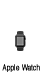
<style>
.page{position:relative;width:44px;height:82px;background:#ffffff}
.page>*{position:absolute;margin:0}
.t1{font:8px "Helvetica";color:#000000;font-weight:bold;scale:0.8 1}
</style>
<div class="page">
<p class="t1" style="left:2px;top:64px;width:38px;height:8px">Apple Watch</p>
</div>
